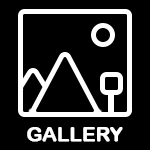
<style>
.page{position:relative;width:150px;height:150px;background:#000000}
.page>*{position:absolute;margin:0}
.t1{font:20px "ArialRoundedMTBold";letter-spacing:-0.005em;color:#ffffff;text-transform:uppercase;font-weight:bold}
</style>
<div class="page">
<p class="t1" style="left:27px;top:127px;width:96px;height:15px">Gallery</p>
</div>
